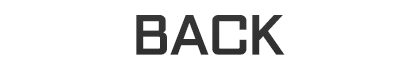
<style>
.page{position:relative;width:420px;height:70px;background:#ffffff}
.page>*{position:absolute;margin:0}
.t1{font:72px "GongGothicOTFMedium";color:#333333;font-variant:small-caps}
</style>
<div class="page">
<p class="t1" style="left:136px;top:15px;width:149px;height:40px">back</p>
</div>
